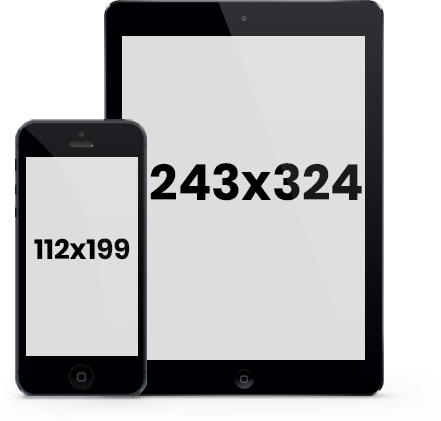
<style>
.page{position:relative;width:441px;height:421px;background:#dddddd}
.page>*{position:absolute;margin:0}
.t1{font:50px "Poppins-Bold";color:#000000}
.t2{font:28px "Poppins-Bold";color:#000000}
</style>
<div class="page">
<p class="t1" style="left:150px;top:163px;width:212px;height:38px">243x324</p>
<p class="t2" style="left:34px;top:238px;width:96px;height:22px">112x199</p>
</div>
